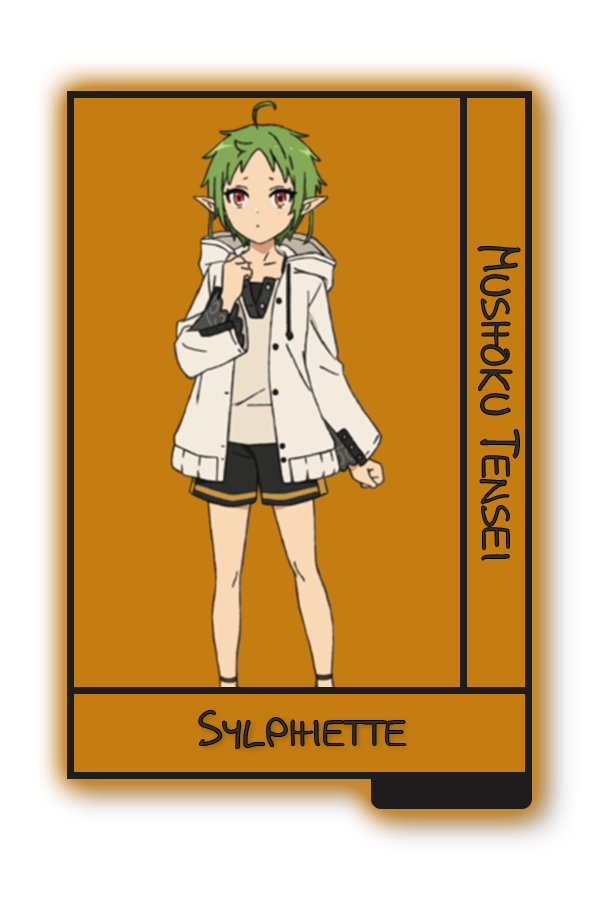
<style>
.page{position:relative;width:600px;height:900px;background:#c57d12}
.page>*{position:absolute;margin:0}
.t1{font:41px "AllCaps";color:#312d2d}
.t2{font:38.3px "AllCaps";color:#312d2d}
</style>
<div class="page">
<p class="t1" style="left:478px;top:247px;width:42px;height:313px;rotate:90deg">Mushoku Tensei</p>
<p class="t2" style="left:199px;top:711px;width:207px;height:37px">Sylphiette</p>
</div>
